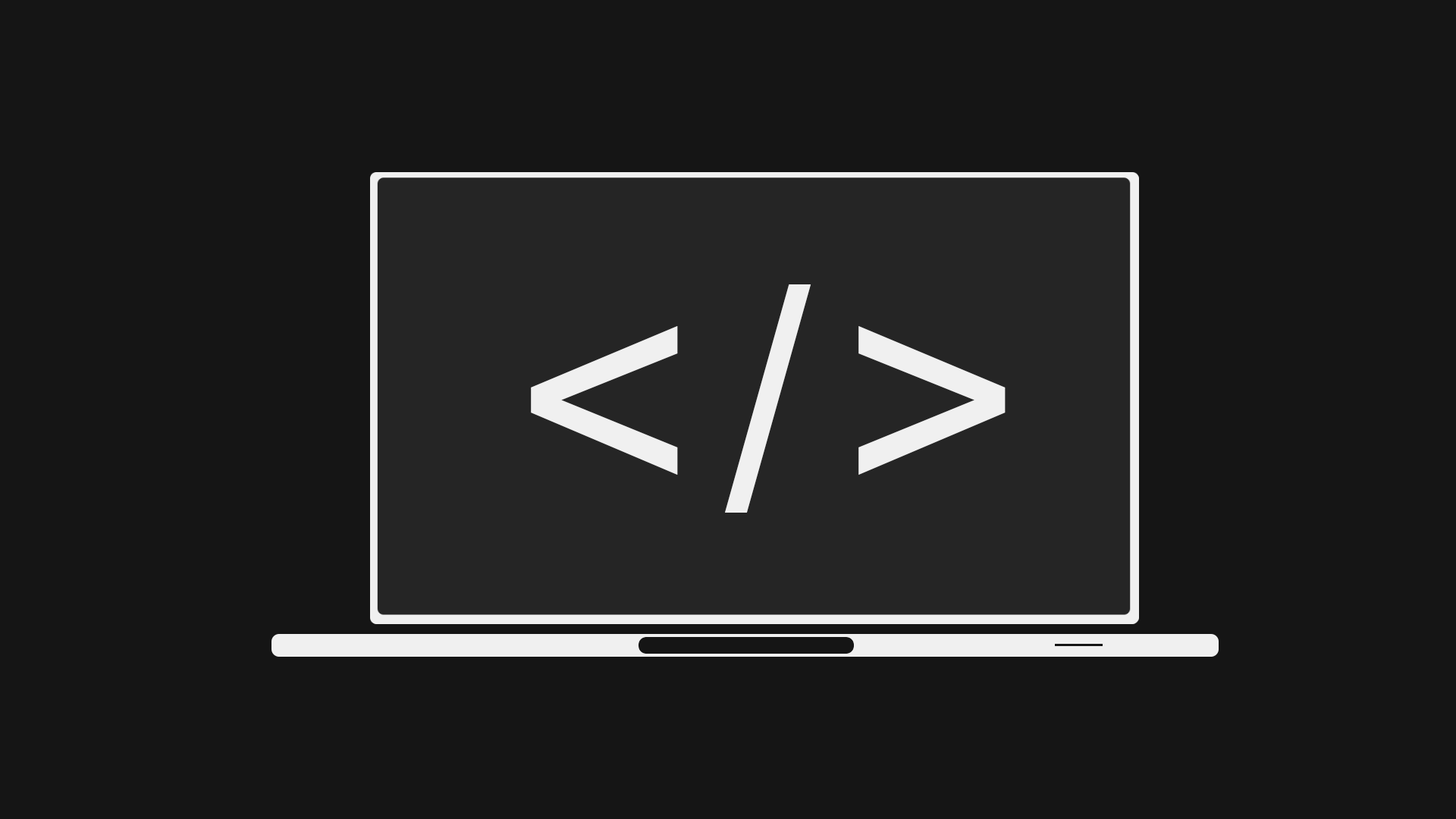
<style>
.page{position:relative;width:1456px;height:819px;background:#151515}
.page>*{position:absolute;margin:0}
.t1{font:308.6px "ArialMT";letter-spacing:0.1em;color:#f0f0f0}
</style>
<div class="page">
<p class="t1" style="left:531px;top:284px;width:475px;height:229px">&lt;/&gt;</p>
</div>
